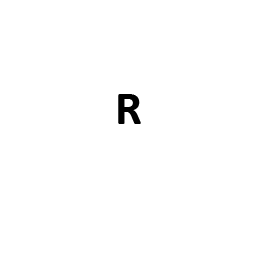
<style>
.page{position:relative;width:256px;height:256px;background:#ffffff}
.page>*{position:absolute;margin:0}
.t1{font:48px "Calibri-Bold";color:#000000}
</style>
<div class="page">
<p class="t1" style="left:118px;top:94px;width:23px;height:30px">R</p>
</div>
